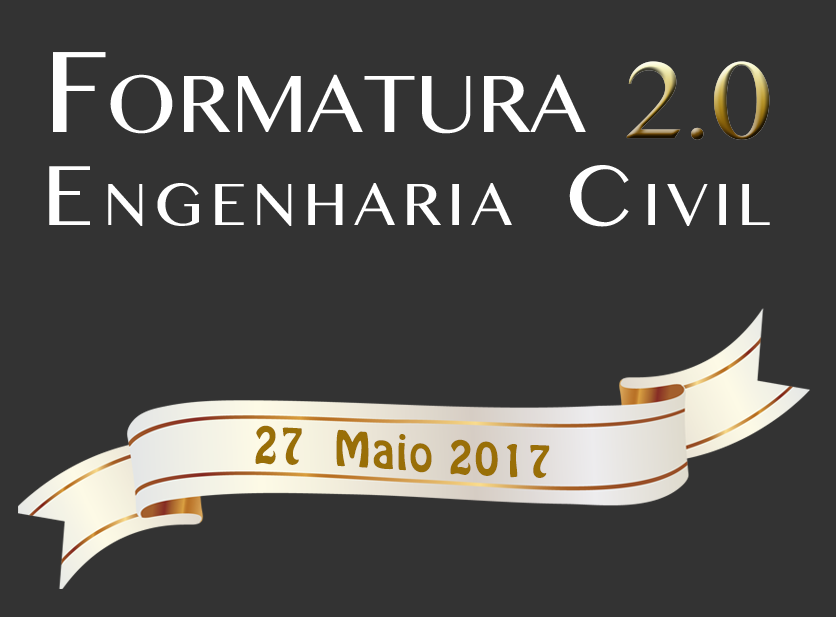
<style>
.page{position:relative;width:836px;height:617px;background:#333333}
.page>*{position:absolute;margin:0}
.t1{font:125px "TeluguMN";color:#ffffff;font-variant:small-caps}
.t2{font:116.7px "TeluguMN";font-variant:small-caps}
.t3{font:91.7px "TeluguMN";letter-spacing:0.1em;color:#ffffff;font-variant:small-caps}
.t4{font:41.7px "HoboStd";letter-spacing:0.05em;color:#996f07}
</style>
<div class="page">
<p class="t1" style="left:53px;top:52px;width:533px;height:82px">Formatura</p>
<p class="t2" style="left:626px;top:61px;width:144px;height:79px">2.0</p>
<p class="t3" style="left:49px;top:165px;width:721px;height:62px">Engenharia Civil</p>
<p class="t4" style="left:255px;top:425px;width:295px;height:53px">27  Maio 2017</p>
</div>
